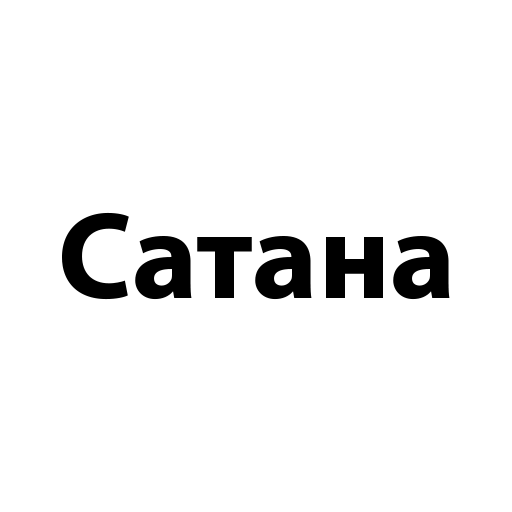
<style>
.page{position:relative;width:512px;height:512px;background:#ffffff}
.page>*{position:absolute;margin:0}
.t1{font:125px "MyriadPro-Bold";color:#000000}
</style>
<div class="page">
<p class="t1" style="left:62px;top:212px;width:388px;height:88px">Сатана</p>
</div>
